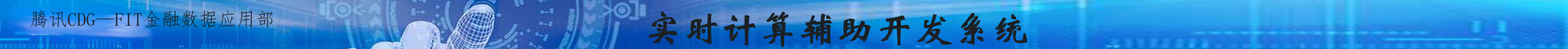
<style>
.page{position:relative;width:1568px;height:49px}
.page>*{position:absolute;margin:0}
.t1{font:18.8px "FangSong";color:#1b2023;text-transform:uppercase}
.t2{font:37.6px "STXinwei";color:#1b2023;text-transform:uppercase;font-weight:bold}
</style>
<div class="page">
<p class="t1" style="left:31px;top:10px;width:242px;height:18px">腾讯CDG—FIT金融数据应用部</p>
<p class="t2" style="left:648px;top:12px;width:380px;height:36px">实时计算辅助开发系统</p>
</div>
